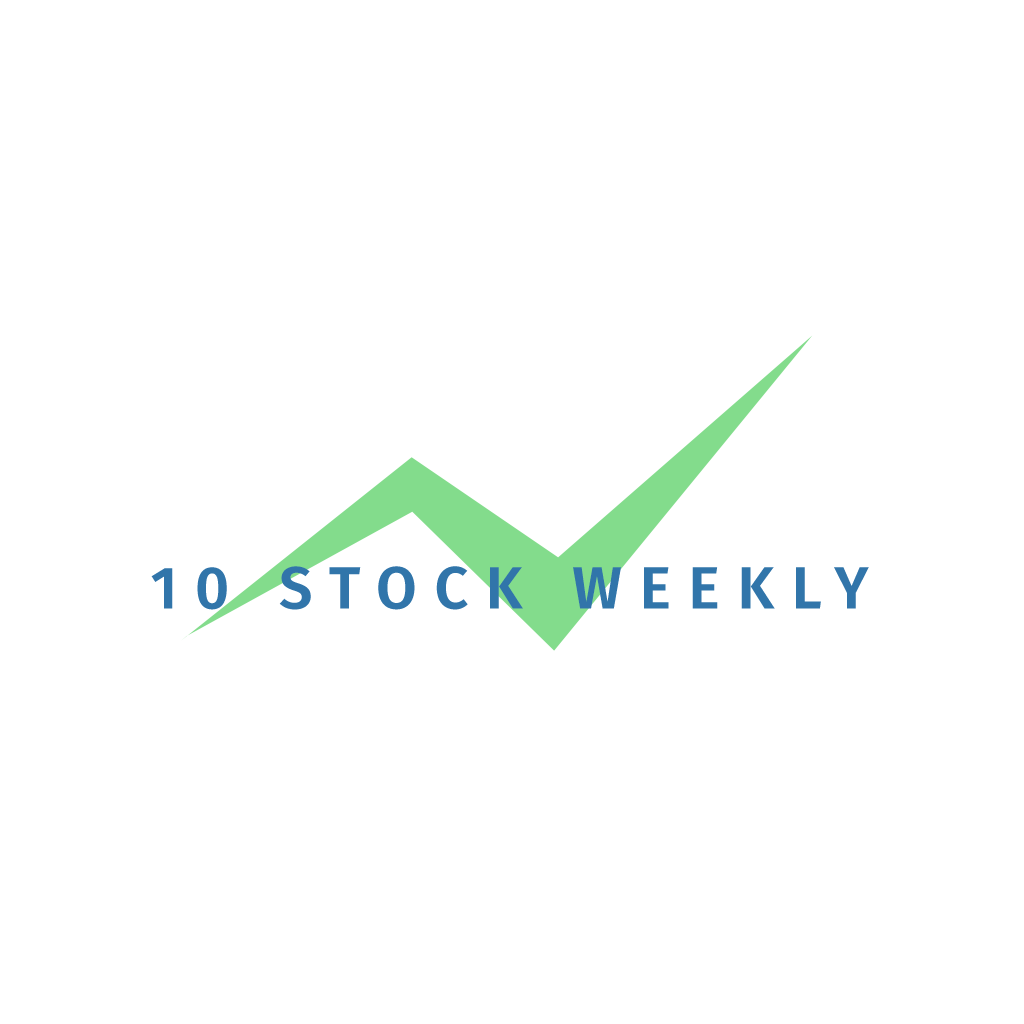
<style>
.page{position:relative;width:1024px;height:1024px;background:#ffffff}
.page>*{position:absolute;margin:0}
.t1{font:60px "FiraSans-SemiBold";letter-spacing:0.3em;color:#3175aa;text-transform:uppercase}
</style>
<div class="page">
<p class="t1" style="left:151px;top:566px;width:718px;height:44px">10 Stock weekly</p>
</div>
